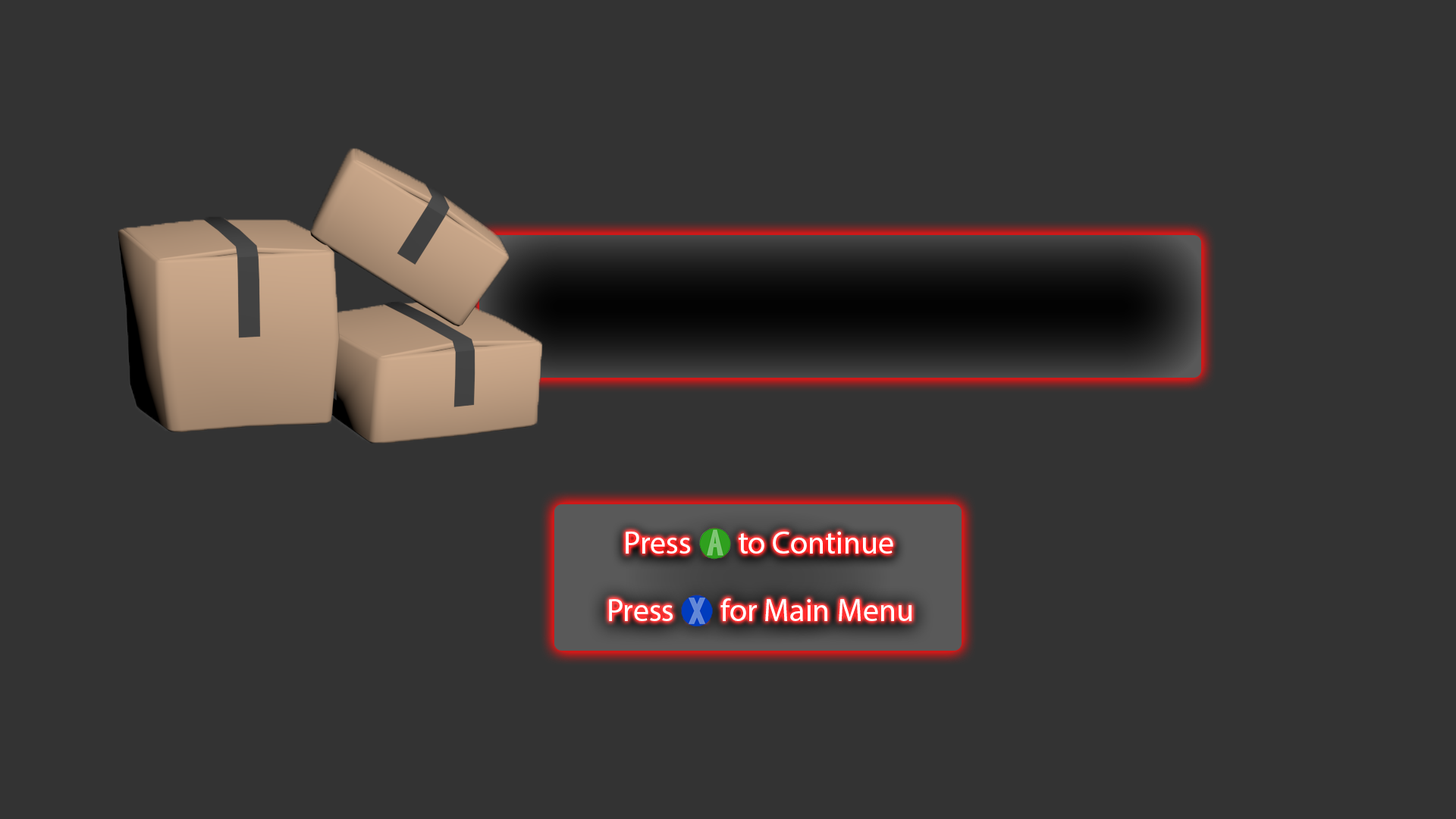
<style>
.page{position:relative;width:1456px;height:819px;background:#333333}
.page>*{position:absolute;margin:0}
.t1{font:31.8px "MyriadPro-Regular";color:#ffffff}
</style>
<div class="page">
<p class="t1" style="left:626px;top:532px;width:267px;height:22px">Press  A  to Continue</p>
<p class="t1" style="left:609px;top:598px;width:303px;height:23px">Press  A  for Main Menu</p>
</div>
